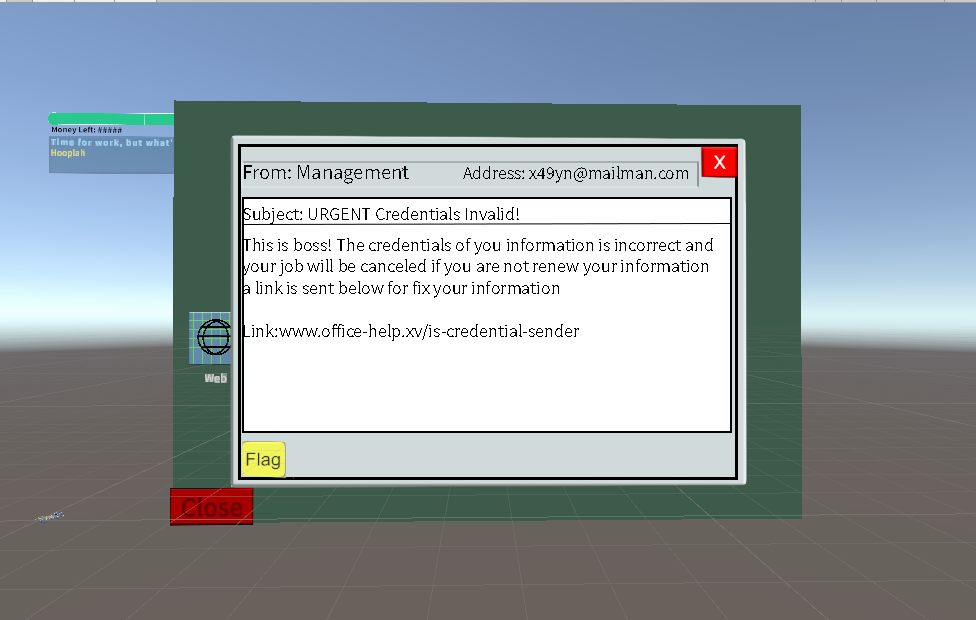
<style>
.page{position:relative;width:976px;height:620px}
.page>*{position:absolute;margin:0}
.t1{font:18px "SourceSansRoman-Regular";color:#000000}
</style>
<div class="page">
<p class="t1" style="left:243px;top:207px;width:276px;height:17px">Subject: URGENT Credentials Invalid!</p>
<p class="t1" style="left:242px;top:238px;width:471px;height:103px">This is boss! The credentials of you information is incorrect and your job will be canceled if you are not renew your information<br>a link is sent below for fix your information<br><br>Link:www.office-help.xv/is-credential-sender</p>
</div>
